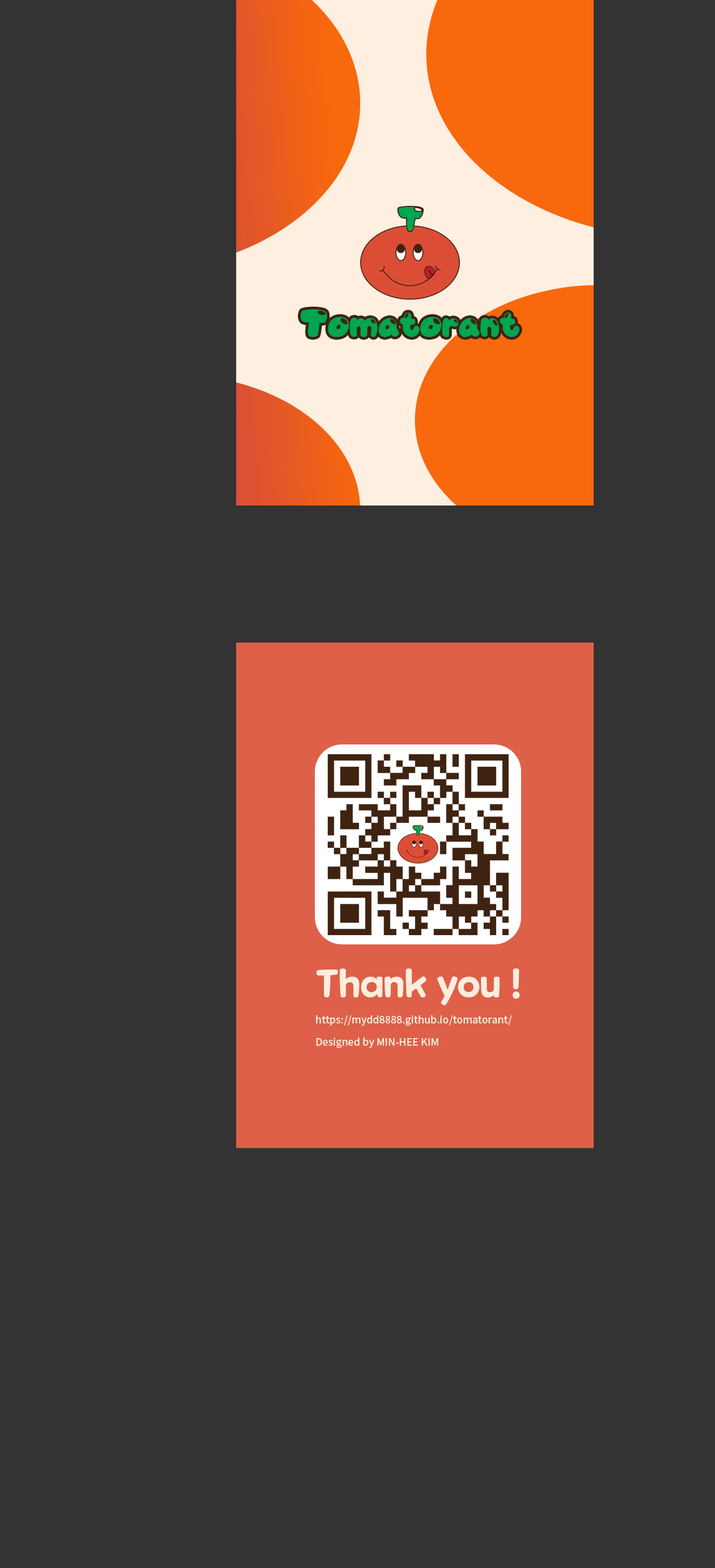
<style>
.page{position:relative;width:715px;height:1568px;background:#333333}
.page>*{position:absolute;margin:0}
.t1{font:37.5px "MaplestoryBold";color:#feedde}
.t2{font:10.1px "NotoSansKR-Medium";color:#feedde}
</style>
<div class="page">
<p class="t1" style="left:316px;top:968px;width:204px;height:38px">Thank you !</p>
<p class="t2" style="left:316px;top:1015px;width:196px;height:11px">https://mydd8888.github.io/tomatorant/</p>
<p class="t2" style="left:316px;top:1037px;width:122px;height:11px">Designed by MIN-HEE KIM</p>
</div>
